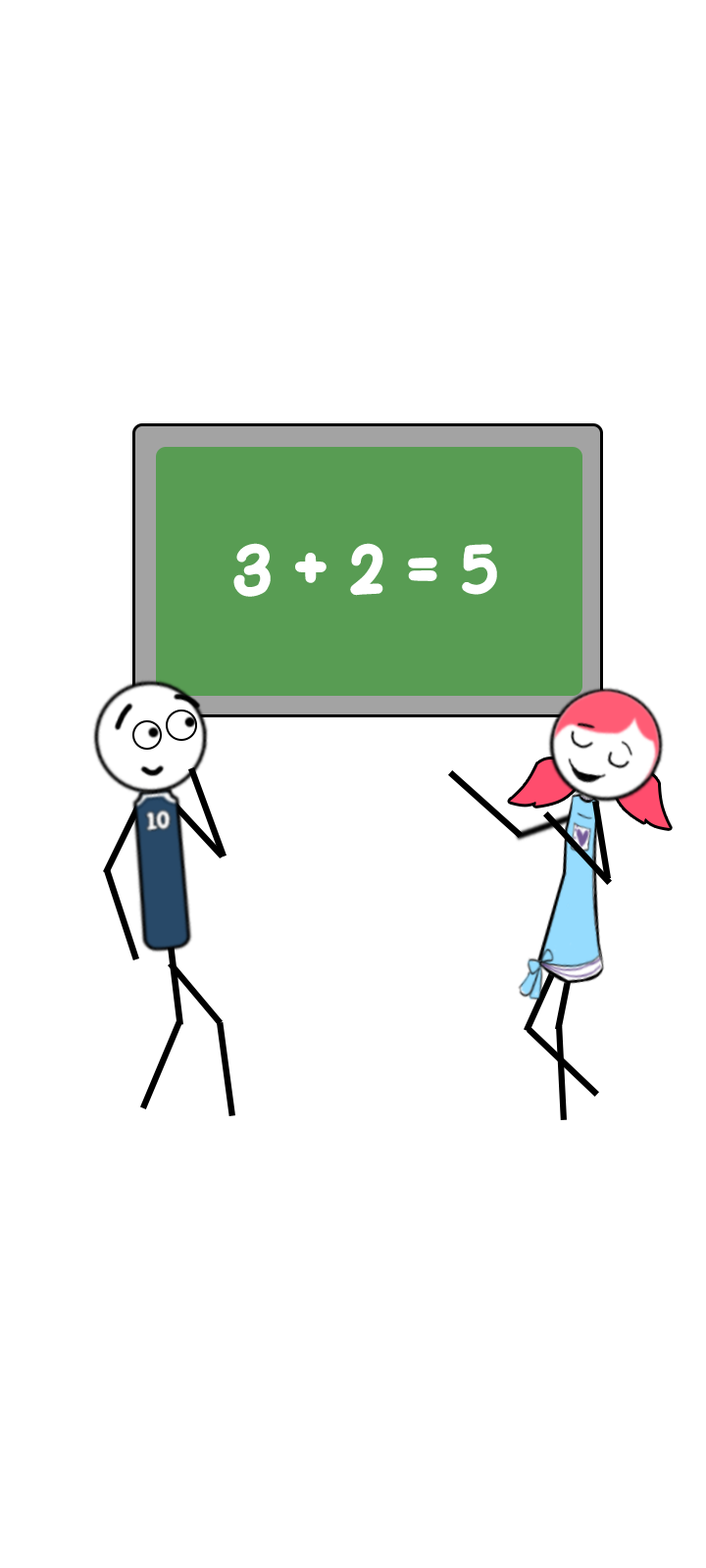
<style>
.page{position:relative;width:706px;height:1568px;background:#ffffff}
.page>*{position:absolute;margin:0}
.t1{font:73.5px "PapernotesBold";color:#ffffff}
</style>
<div class="page">
<p class="t1" style="left:233px;top:543px;width:264px;height:54px">3 + 2 = 5</p>
</div>
